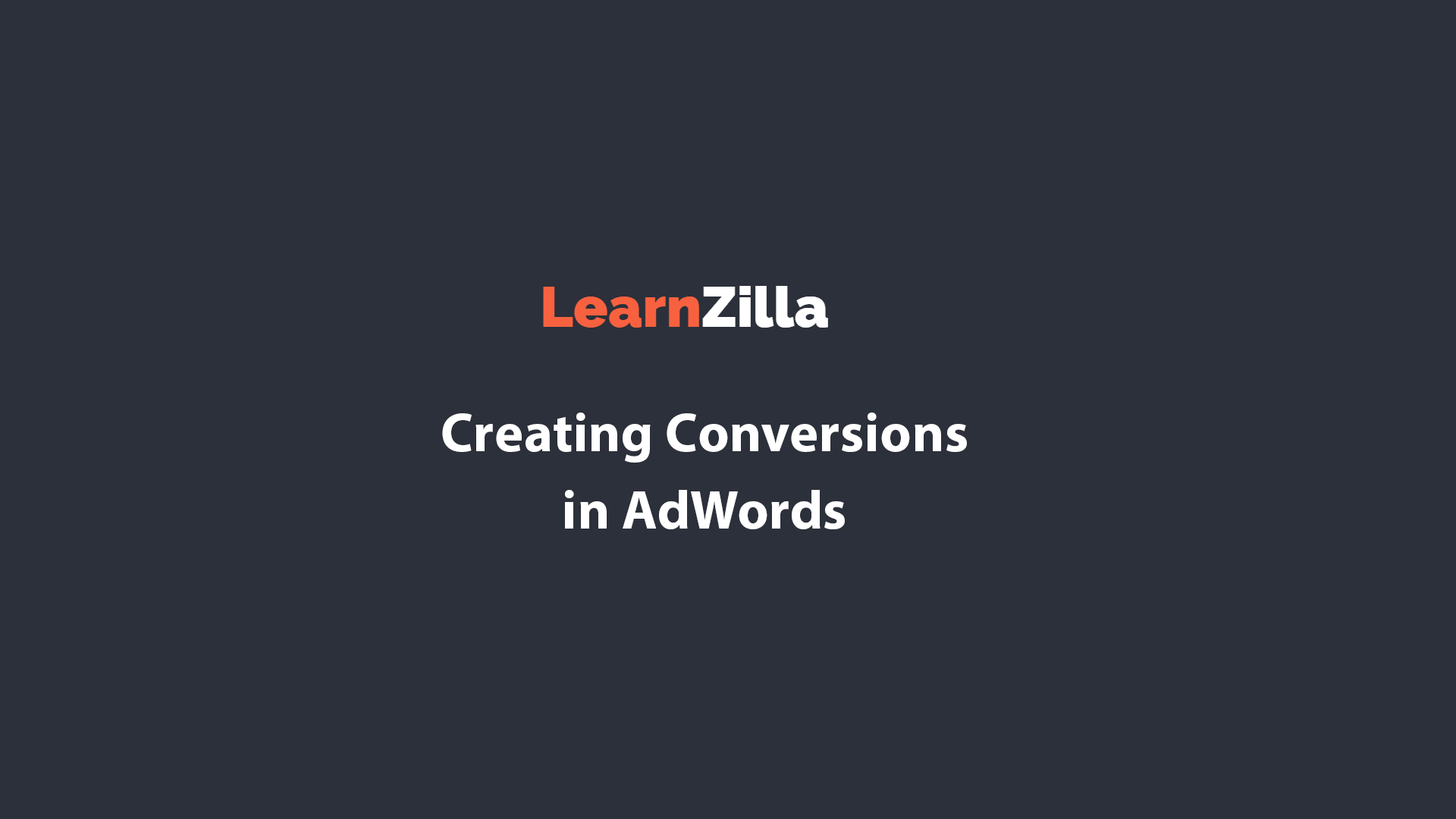
<style>
.page{position:relative;width:1456px;height:819px;background:#2b303a}
.page>*{position:absolute;margin:0}
.t1{font:54.6px/77.3px "MyriadPro-Bold";letter-spacing:0.01em;color:#ffffff}
</style>
<div class="page">
<p class="t1" style="left:442px;top:413px;width:525px;height:116px;text-align:center">Creating Conversions<br>in AdWords</p>
</div>
